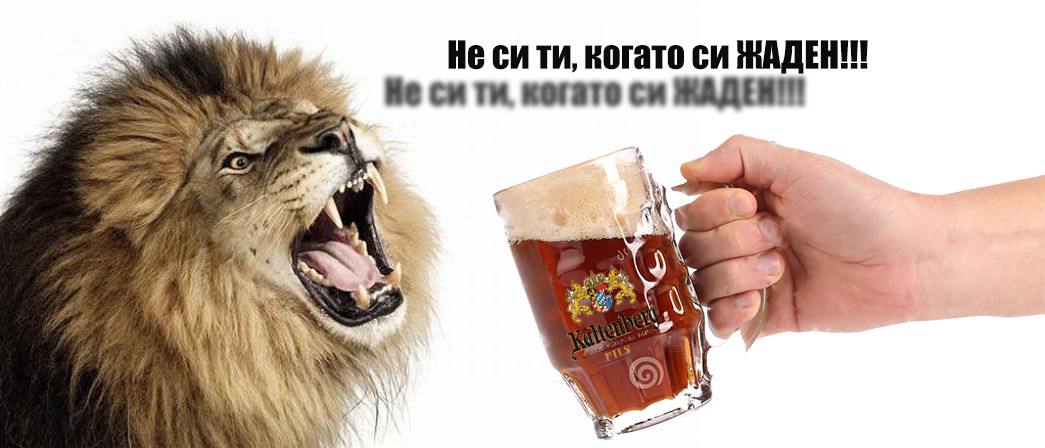
<style>
.page{position:relative;width:1045px;height:448px;background:#ffffff}
.page>*{position:absolute;margin:0}
.t1{font:36px "Impact";color:#0c0b0b}
</style>
<div class="page">
<p class="t1" style="left:448px;top:40px;width:420px;height:34px">Не си ти, когато си ЖАДЕН!!!</p>
</div>
